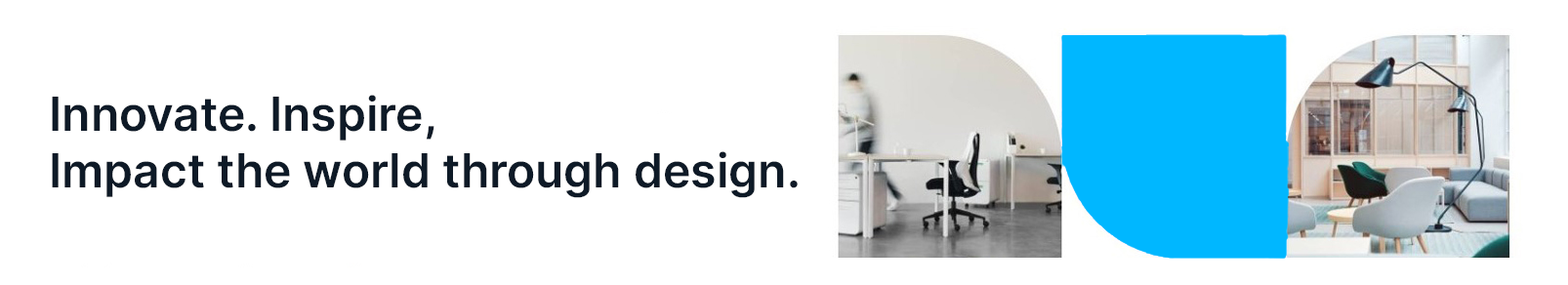
<style>
.page{position:relative;width:1568px;height:285px;background:#ffffff}
.page>*{position:absolute;margin:0}
.t1{font:46.9px "Inter-SemiBold";color:#0e1a27}
</style>
<div class="page">
<p class="t1" style="left:52px;top:95px;width:746px;height:103px">Innovate. Inspire,<br>Impact the world through design.</p>
</div>
